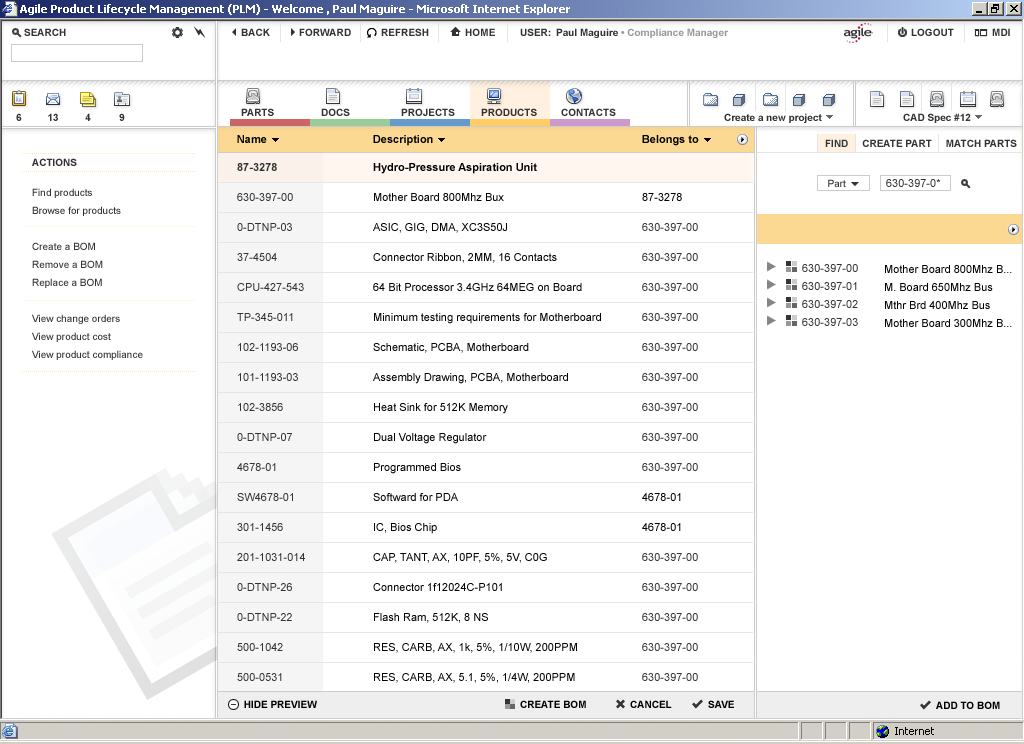
<style>
.page{position:relative;width:1024px;height:744px;background:#ffffff}
.page>*{position:absolute;margin:0}
.t1{font:11px "Arial-BoldMT";color:#000000}
.t2{font:10px "Arial-BoldMT";color:#333333}
.t3{font:11px/10px "ArialMT";color:#333333}
.t4{font:11px/10px "Arial-BoldMT";color:#333333}
.t5{font:11px/10px "ArialMT";color:#000000}
.t6{font:11px/10px "Arial-BoldMT";color:#000000}
.t7{font:10px "ArialMT";color:#333333}
.t8{font:11px "ArialMT";color:#333333}
.t9{font:10px/18px "ArialMT";color:#333333}
.t10{font:11px/18px "ArialMT";color:#333333}
.t11{font:11px/18px "ArialMT";color:#000000}
.t12{font:10px "Arial-BoldMT";color:#000000}
</style>
<div class="page">
<p class="t1" style="left:237px;top:135px;width:30px;height:8px">Name</p>
<p class="t1" style="left:373px;top:135px;width:60px;height:11px">Description</p>
<p class="t1" style="left:642px;top:135px;width:57px;height:11px">Belongs to</p>
<p class="t2" style="left:825px;top:139px;width:192px;height:8px">FIND     CREATE PART     MATCH PARTS</p>
<p class="t2" style="left:32px;top:158px;width:45px;height:8px">ACTIONS</p>
<p class="t3" style="left:237px;top:163px;width:68px;height:518px"><span class="t4">87-3278<br><br><br></span>630-397-00<br> <br><br>0-DTNP-03<br><br> <br>37-4504  <br><br>          <br>CPU-427-543<br><br><br>TP-345-011<br><br><br>102-1193-06<br><br><br>101-1193-03<br><br><br>102-3856<br><br><br>0-DTNP-07<br><br><br>4678-01<br><br><br>SW4678-01<br><br><br>301-1456<br><br><br>201-1031-014<br><br><br>0-DTNP-26<br><br><br>0-DTNP-22<br><br><br>500-1042<br><br><br>500-0531</p>
<p class="t5" style="left:373px;top:163px;width:228px;height:520px"><span class="t6">Hydro-Pressure Aspiration Unit<br><br><br></span>Mother Board 800Mhz Bux<br><br><br>ASIC, GIG, DMA, XC3S50J<br><br><br>Connector Ribbon, 2MM, 16 Contacts<br><br><br>64 Bit Processor 3.4GHz 64MEG on Board<br><br><br>Minimum testing requirements for Motherboard<br><br><br>Schematic, PCBA, Motherboard<br><br><br>Assembly Drawing, PCBA, Motherboard<br><br><br>Heat Sink for 512K Memory<br><br><br>Dual Voltage Regulator<br><br><br>Programmed Bios<br><br><br>Softward for PDA<br><br><br>IC, Bios Chip<br><br><br>CAP, TANT, AX, 10PF, 5%, 5V, C0G<br><br><br>Connector 1f12024C-P101<br><br><br>Flash Ram, 512K, 8 NS<br><br><br>RES, CARB, AX, 1k, 5%, 1/10W, 200PPM<br><br><br>RES, CARB, AX, 5.1, 5%, 1/4W, 200PPM</p>
<p class="t7" style="left:828px;top:179px;width:18px;height:8px">Part</p>
<p class="t8" style="left:886px;top:179px;width:55px;height:8px">630-397-0*</p>
<p class="t9" style="left:32px;top:188px;width:111px;height:172px">Find products<br>Browse for products<br><br>Create a BOM<br>Remove a BOM<br>Replace a BOM<br><br>View change orders<br>View product cost<br>View product compliance</p>
<p class="t3" style="left:642px;top:193px;width:56px;height:488px"><span class="t6"><br><br><br></span><span class="t5">87-3278<br><br><br></span>630-397-00<br><br><br>630-397-00<br><br><br>630-397-00<br><br><br>630-397-00<br><br><br>630-397-00<br><br><br>630-397-00<br><br><br>630-397-00<br><br><br>630-397-00<br><br><br>630-397-00<br><span class="t5"><br><br>4678-01<br><br><br>4678-01<br><br><br></span>630-397-00<br><br><br>630-397-00<br><br><br>630-397-00<br><br><br>630-397-00<br><br><br>630-397-00</p>
<p class="t10" style="left:802px;top:264px;width:56px;height:62px">630-397-00<br>630-397-01<br>630-397-02<br>630-397-03</p>
<p class="t11" style="left:885px;top:265px;width:127px;height:62px">Mother Board 800Mhz B...<br>M. Board 650Mhz Bus<br>Mthr Brd 400Mhz Bus<br>Mother Board 300Mhz B...</p>
<p class="t12" style="left:244px;top:700px;width:73px;height:8px">HIDE PREVIEW</p>
<p class="t12" style="left:520px;top:700px;width:66px;height:8px">CREATE BOM</p>
<p class="t12" style="left:630px;top:700px;width:42px;height:8px">CANCEL</p>
<p class="t12" style="left:708px;top:700px;width:26px;height:8px">SAVE</p>
<p class="t12" style="left:936px;top:701px;width:64px;height:8px">ADD TO BOM</p>
</div>
